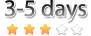
<style>
.page{position:relative;width:91px;height:36px;background:#ffffff}
.page>*{position:absolute;margin:0}
.t1{font:24px "MyriadPro-Regular"}
</style>
<div class="page">
<p class="t1" style="left:4px;top:0px;width:82px;height:22px">3-5 days</p>
</div>
